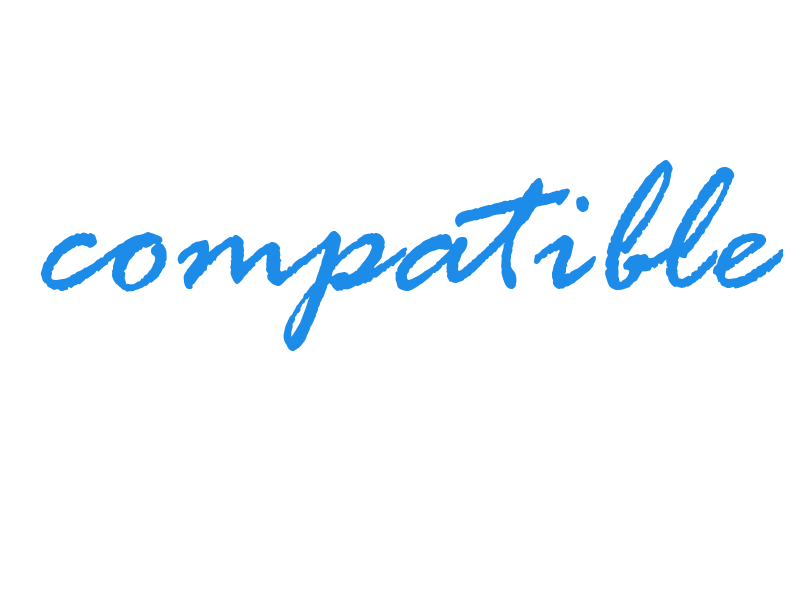
<style>
.page{position:relative;width:800px;height:600px;background:#ffffff}
.page>*{position:absolute;margin:0}
.t1{font:200px "RageItalic";color:#1d8be8}
</style>
<div class="page">
<p class="t1" style="left:40px;top:160px;width:744px;height:191px">compatible</p>
</div>
